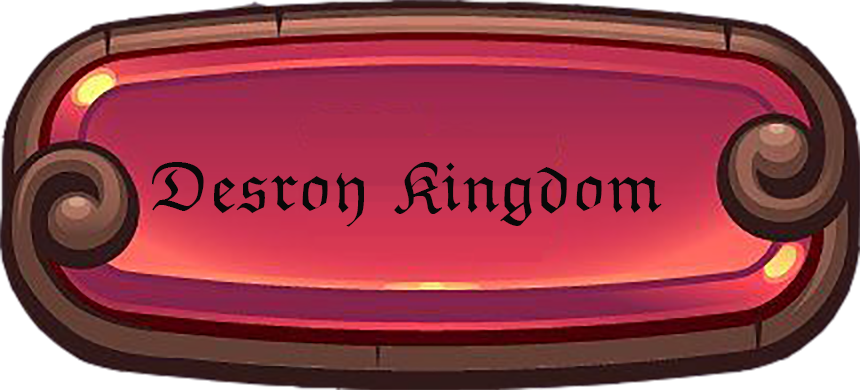
<style>
.page{position:relative;width:860px;height:390px}
.page>*{position:absolute;margin:0}
.t1{font:72px "EuclidFraktur";color:#080808}
</style>
<div class="page">
<p class="t1" style="left:151px;top:162px;width:511px;height:65px">Desroy Kingdom</p>
</div>
